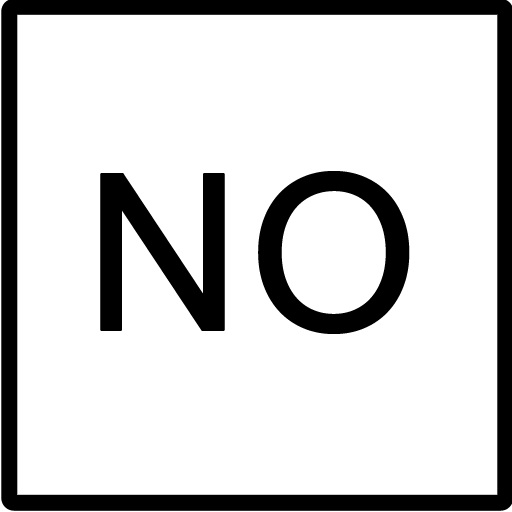
<style>
.page{position:relative;width:512px;height:512px;background:#ffffff}
.page>*{position:absolute;margin:0}
.t1{font:279.4px "Tunga";color:#000000;font-weight:bold}
</style>
<div class="page">
<p class="t1" style="left:100px;top:171px;width:310px;height:163px">NO</p>
</div>
